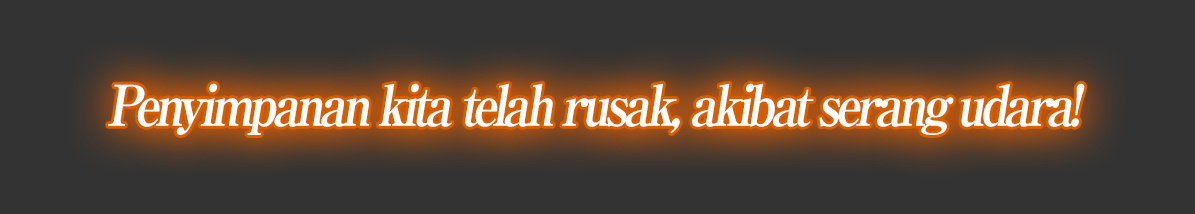
<style>
.page{position:relative;width:1195px;height:214px;background:#333333}
.page>*{position:absolute;margin:0}
.t1{font:56px "RyuminPro-ExBold";letter-spacing:-0.1em;color:#ffffff;font-style:italic;scale:0.9 1}
</style>
<div class="page">
<p class="t1" style="left:108px;top:83px;width:977px;height:52px">Penyimpanan kita telah rusak, akibat serang udara!</p>
</div>
